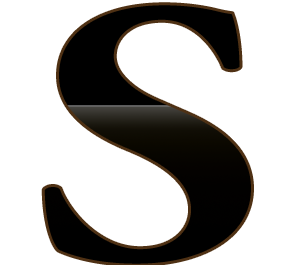
<style>
.page{position:relative;width:297px;height:265px;background:#ffffff}
.page>*{position:absolute;margin:0}
.t1{font:377.5px "AGaramondPro-Bold";color:#000000;scale:1.22 1}
</style>
<div class="page">
<p class="t1" style="left:43px;top:3px;width:210px;height:263px">S</p>
</div>
